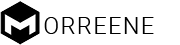
<style>
.page{position:relative;width:180px;height:45px;background:#ffffff}
.page>*{position:absolute;margin:0}
.t1{font:23px "Roboto-Light";letter-spacing:0.075em;color:#000000}
</style>
<div class="page">
<p class="t1" style="left:44px;top:17px;width:110px;height:17px">ORREENE</p>
</div>
